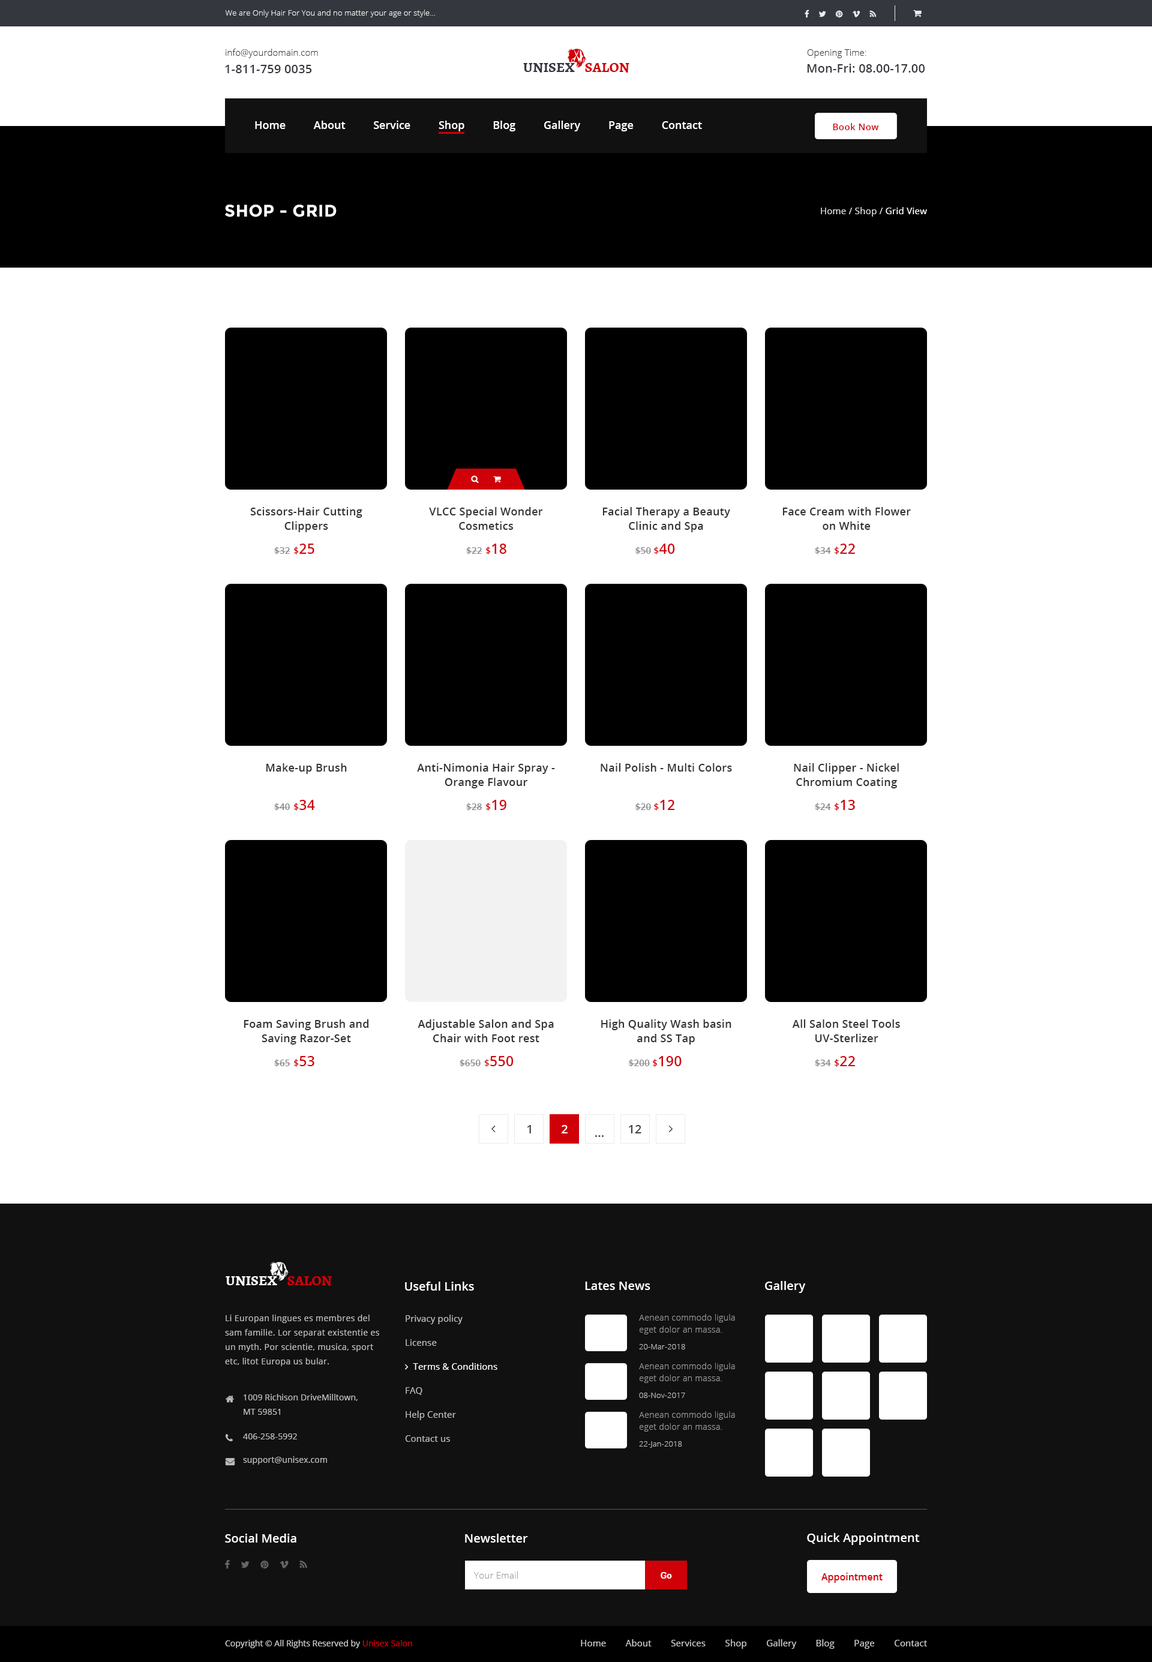
<style>
.page{position:relative;width:1152px;height:1662px;background:#ffffff}
.page>*{position:absolute;margin:0}
.t1{font:7.8px "OpenSans-Light";letter-spacing:0.01em;color:#efefef}
.t2{font:9px "OpenSans-Light";letter-spacing:0.01em;color:#35373e}
.t3{font:12px "OpenSans-Semibold";letter-spacing:0.01em;color:#35373e}
.t4{font:14.4px "Alegreya-Bold";color:#35373e;text-transform:uppercase}
.t5{font:14.4px "Alegreya-Bold";color:#d00009;text-transform:uppercase}
.t6{font:10.8px "OpenSans-Semibold";color:#ffffff}
.t7{font:9px "OpenSans-Semibold";letter-spacing:0.03em;color:#d00009}
.t8{font:16.8px "Montserrat-Bold";letter-spacing:0.02em;color:#ffffff;text-transform:uppercase}
.t9{font:9px "OpenSans";letter-spacing:0.02em;color:#dddddd}
.t10{font:9px "OpenSans";letter-spacing:0.02em;color:#ffffff}
.t11{font:10.8px/14.4px "OpenSans-Semibold";letter-spacing:0.02em;color:#333333}
.t12{font:9px "OpenSans-Semibold";letter-spacing:0.02em;color:#888888}
.t13{font:9.1px "OpenSans-Semibold";letter-spacing:0.02em;color:#d00009}
.t14{font:13.7px "OpenSans-Semibold";letter-spacing:0.02em;color:#d00009}
.t15{font:10.8px "OpenSans-Semibold";letter-spacing:0.02em;color:#333333}
.t16{font:12px "OpenSans-Semibold";color:#444444}
.t17{font:12px "OpenSans-Semibold";color:#ffffff}
.t18{font:14.4px "Alegreya-Bold";color:#ffffff;text-transform:uppercase}
.t19{font:8.4px/14.4px "OpenSans";letter-spacing:0.03em;color:#bbbbbb}
.t20{font:8.4px/12px "OpenSans-Light";letter-spacing:0.03em;color:#999999}
.t21{font:7.8px "OpenSans-Light";letter-spacing:0.01em;color:#bbbbbb}
.t22{font:8.4px/14.4px "OpenSans";letter-spacing:0.01em;color:#bbbbbb}
.t23{font:8.4px "OpenSans";letter-spacing:0.01em;color:#bbbbbb}
.t24{font:9px "OpenSans-Light";letter-spacing:0.02em;color:#999999}
.t25{font:9px "RobotoSlab-Bold";letter-spacing:0.02em;color:#ffffff}
.t26{font:9.6px "OpenSans-Semibold";color:#d00009}
.t27{font:8.4px "OpenSans";color:#cccccc}
.t28{font:8.4px "OpenSans";color:#d00009}
.t29{font:9px "OpenSans";letter-spacing:0.01em;color:#cccccc}
</style>
<div class="page">
<p class="t1" style="left:225px;top:10px;width:210px;height:7px">We are Only Hair For You and no matter your age or style...</p>
<p class="t2" style="left:226px;top:49px;width:92px;height:9px">info@yourdomain.com</p>
<p class="t2" style="left:807px;top:49px;width:59px;height:9px">Opening Time:</p>
<p class="t3" style="left:225px;top:65px;width:87px;height:8px">1-811-759 0035</p>
<p class="t4" style="left:523px;top:62px;width:106px;height:11px">Unisex    <span class="t5">Salon</span></p>
<p class="t3" style="left:807px;top:64px;width:118px;height:9px">Mon-Fri: 08.00-17.00</p>
<p class="t6" style="left:255px;top:121px;width:447px;height:10px">Home          About          Service          Shop          Blog          Gallery          Page          Contact</p>
<p class="t7" style="left:833px;top:123px;width:46px;height:7px">Book Now</p>
<p class="t8" style="left:225px;top:205px;width:112px;height:12px">Shop - Grid</p>
<p class="t9" style="left:821px;top:207px;width:106px;height:10px">Home / Shop / <span class="t10">Grid View</span></p>
<p class="t11" style="left:250px;top:507px;width:112px;height:25px;text-align:center">Scissors-Hair Cutting Clippers</p>
<p class="t11" style="left:429px;top:507px;width:114px;height:23px;text-align:center">VLCC Special Wonder  Cosmetics</p>
<p class="t11" style="left:602px;top:507px;width:128px;height:25px;text-align:center">Facial Therapy a Beauty Clinic and Spa</p>
<p class="t11" style="left:782px;top:507px;width:129px;height:23px;text-align:center">Face Cream with Flower<br>on White</p>
<p class="t12" style="left:274px;top:544px;width:40px;height:10px">$32 <span class="t13">$</span><span class="t14">25</span></p>
<p class="t12" style="left:466px;top:544px;width:40px;height:10px">$22 <span class="t13">$</span><span class="t14">18</span></p>
<p class="t12" style="left:635px;top:544px;width:40px;height:10px">$50 <span class="t13">$</span><span class="t14">40</span></p>
<p class="t12" style="left:815px;top:544px;width:40px;height:10px">$34 <span class="t13">$</span><span class="t14">22</span></p>
<p class="t15" style="left:266px;top:763px;width:81px;height:11px">Make-up Brush</p>
<p class="t11" style="left:417px;top:763px;width:138px;height:25px;text-align:center">Anti-Nimonia Hair Spray - Orange Flavour</p>
<p class="t15" style="left:601px;top:763px;width:131px;height:9px">Nail Polish - Multi Colors</p>
<p class="t11" style="left:794px;top:763px;width:105px;height:25px;text-align:center">Nail Clipper - Nickel Chromium Coating</p>
<p class="t12" style="left:274px;top:800px;width:41px;height:11px">$40 <span class="t13">$</span><span class="t14">34</span></p>
<p class="t12" style="left:466px;top:800px;width:40px;height:11px">$28 <span class="t13">$</span><span class="t14">19</span></p>
<p class="t12" style="left:635px;top:800px;width:40px;height:11px">$20 <span class="t13">$</span><span class="t14">12</span></p>
<p class="t12" style="left:815px;top:800px;width:40px;height:11px">$24 <span class="t13">$</span><span class="t14">13</span></p>
<p class="t11" style="left:244px;top:1019px;width:125px;height:26px;text-align:center">Foam Saving Brush and Saving Razor-Set</p>
<p class="t11" style="left:418px;top:1019px;width:136px;height:23px;text-align:center">Adjustable Salon and Spa Chair with Foot rest</p>
<p class="t11" style="left:601px;top:1019px;width:130px;height:26px;text-align:center">High Quality Wash basin and SS Tap</p>
<p class="t11" style="left:792px;top:1019px;width:108px;height:23px;text-align:center">All Salon Steel Tools UV-Sterlizer</p>
<p class="t12" style="left:274px;top:1056px;width:40px;height:11px">$65 <span class="t13">$</span><span class="t14">53</span></p>
<p class="t12" style="left:459px;top:1056px;width:55px;height:11px">$650 <span class="t13">$</span><span class="t14">550</span></p>
<p class="t12" style="left:628px;top:1056px;width:54px;height:11px">$200 <span class="t13">$</span><span class="t14">190</span></p>
<p class="t12" style="left:815px;top:1056px;width:40px;height:11px">$34 <span class="t13">$</span><span class="t14">22</span></p>
<p class="t16" style="left:527px;top:1125px;width:4px;height:8px">1</p>
<p class="t17" style="left:562px;top:1125px;width:6px;height:8px">2</p>
<p class="t16" style="left:629px;top:1125px;width:12px;height:8px">12</p>
<p class="t16" style="left:595px;top:1135px;width:9px;height:2px">...</p>
<p class="t18" style="left:226px;top:1276px;width:106px;height:10px">Unisex    <span class="t5">Salon</span></p>
<p class="t17" style="left:405px;top:1282px;width:69px;height:9px">Useful Links</p>
<p class="t17" style="left:585px;top:1282px;width:65px;height:8px">Lates News</p>
<p class="t17" style="left:765px;top:1281px;width:41px;height:12px">Gallery</p>
<p class="t19" style="left:225px;top:1315px;width:154px;height:51px">Li Europan lingues es membres del sam familie. Lor separat existentie es un myth. Por scientie, musica, sport etc, litot Europa us bular.</p>
<p class="t20" style="left:639px;top:1314px;width:96px;height:20px">Aenean commodo ligula eget dolor an massa.</p>
<p class="t21" style="left:639px;top:1344px;width:46px;height:5px">20-Mar-2018</p>
<p class="t20" style="left:639px;top:1363px;width:96px;height:20px">Aenean commodo ligula eget dolor an massa.</p>
<p class="t22" style="left:244px;top:1394px;width:114px;height:21px">1009 Richison DriveMilltown, <br>MT 59851</p>
<p class="t21" style="left:639px;top:1393px;width:46px;height:5px">08-Nov-2017</p>
<p class="t20" style="left:639px;top:1411px;width:96px;height:21px">Aenean commodo ligula eget dolor an massa.</p>
<p class="t23" style="left:243px;top:1433px;width:54px;height:6px">406-258-5992</p>
<p class="t21" style="left:639px;top:1441px;width:43px;height:7px">22-Jan-2018</p>
<p class="t23" style="left:243px;top:1456px;width:84px;height:9px">support@unisex.com</p>
<p class="t17" style="left:225px;top:1534px;width:71px;height:9px">Social Media</p>
<p class="t17" style="left:465px;top:1534px;width:63px;height:9px">Newsletter</p>
<p class="t17" style="left:807px;top:1533px;width:113px;height:12px">Quick Appointment</p>
<p class="t24" style="left:474px;top:1571px;width:44px;height:8px">Your Email</p>
<p class="t25" style="left:661px;top:1572px;width:11px;height:7px">Go</p>
<p class="t26" style="left:821px;top:1573px;width:62px;height:10px">Appointment</p>
<p class="t27" style="left:225px;top:1640px;width:187px;height:8px">Copyright © All Rights Reserved by <span class="t28">Unisex Salon</span></p>
<p class="t29" style="left:581px;top:1639px;width:346px;height:10px">Home        About        Services        Shop        Gallery        Blog        Page        Contact</p>
</div>
